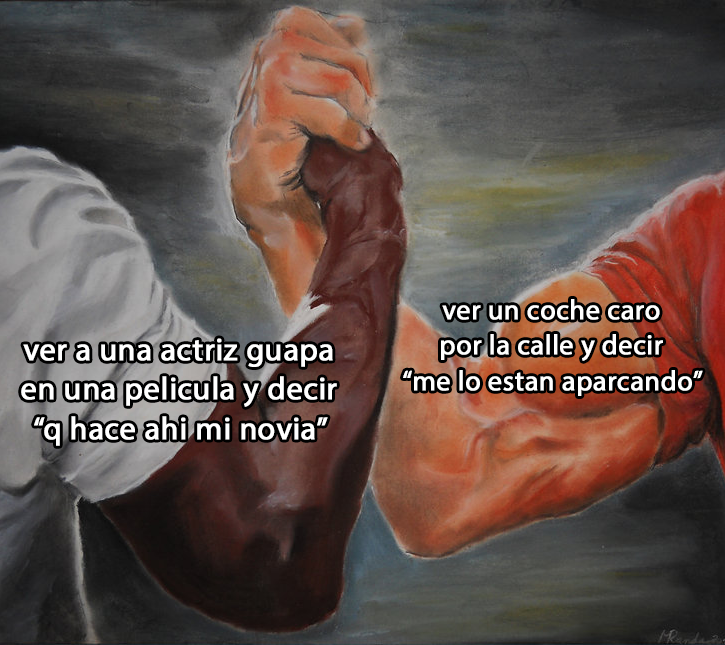
<style>
.page{position:relative;width:725px;height:645px}
.page>*{position:absolute;margin:0}
.t1{font:28px "MyriadPro-Regular";color:#ffffff;font-weight:bold}
.t2{font:32.1px "MyriadPro-Regular";color:#ffffff;font-weight:bold}
</style>
<div class="page">
<p class="t1" style="left:403px;top:299px;width:300px;height:97px;text-align:center">ver un coche caro<br>por la calle y decir<br>“me lo estan aparcando”</p>
<p class="t2" style="left:21px;top:338px;width:316px;height:108px;text-align:center">ver a una actriz guapa<br>en una pelicula y decir<br>“q hace ahi mi novia”</p>
</div>
